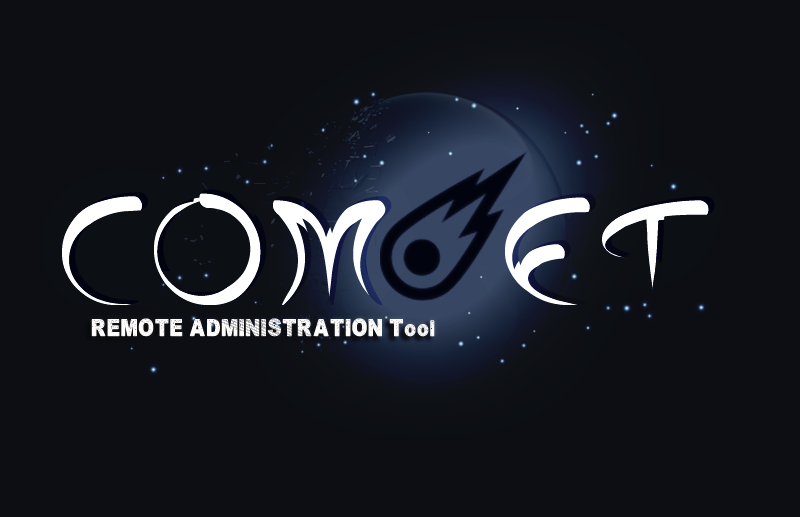
<style>
.page{position:relative;width:800px;height:517px;background:#0c0e13}
.page>*{position:absolute;margin:0}
.t1{font:129.3px "extrahot";color:#fdfcfc}
.t2{font:28.8px "Determined";color:#fffdfd;scale:0.81 1}
</style>
<div class="page">
<p class="t1" style="left:62px;top:189px;width:653px;height:116px">Com   et</p>
<p class="t2" style="left:91px;top:318px;width:344px;height:19px">REMOTE ADMINISTRATION Tool</p>
</div>
